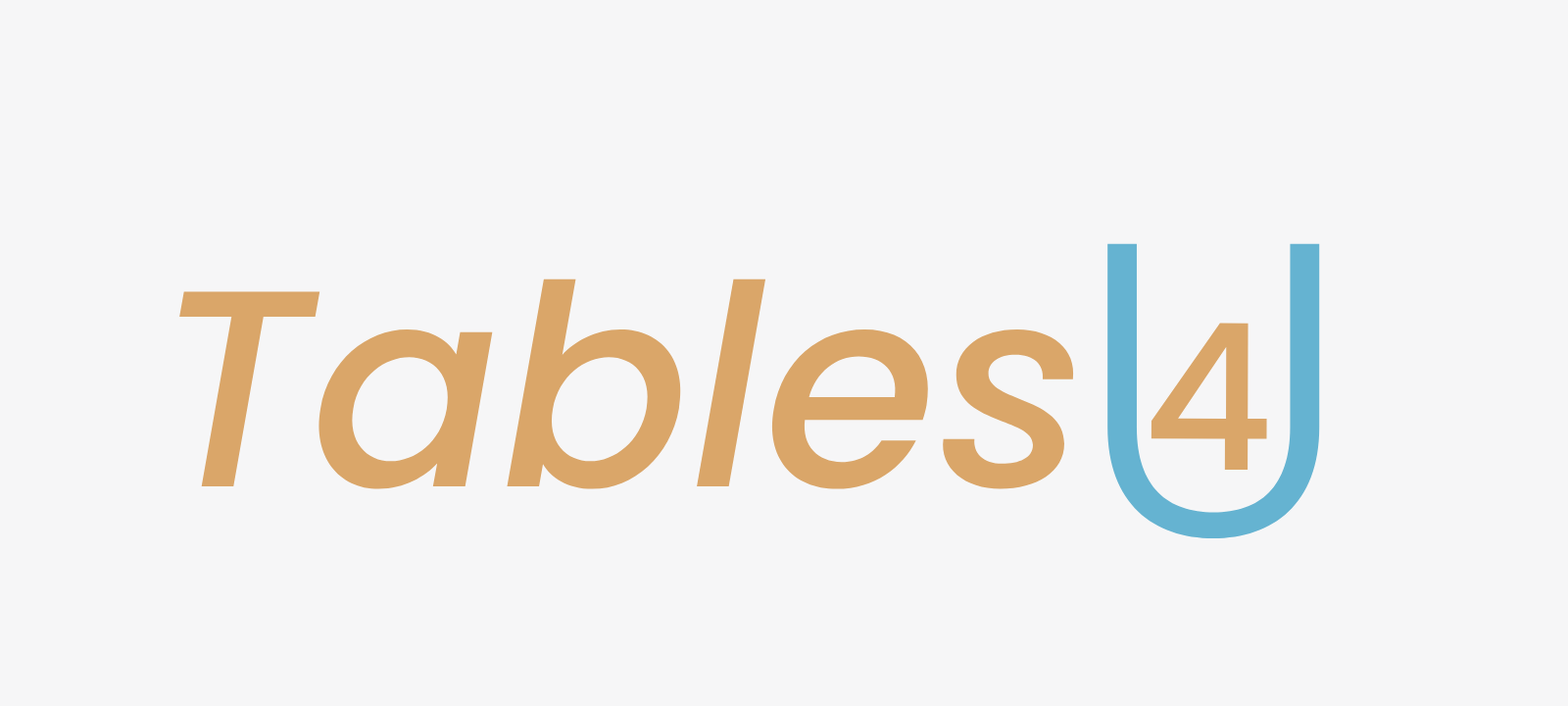
<style>
.page{position:relative;width:1568px;height:706px;background:#f6f6f7}
.page>*{position:absolute;margin:0}
.t1{font:416.8px "Poppins-Light";color:#65b3d1}
.t2{font:279.8px "Poppins-MediumItalic";color:#daa669}
.t3{font:203.3px "Poppins-Medium";color:#daa669}
</style>
<div class="page">
<p class="t1" style="left:1107px;top:243px;width:213px;height:295px">U</p>
<p class="t2" style="left:179px;top:278px;width:898px;height:211px">Tables</p>
<p class="t3" style="left:1151px;top:322px;width:116px;height:148px">4</p>
</div>
